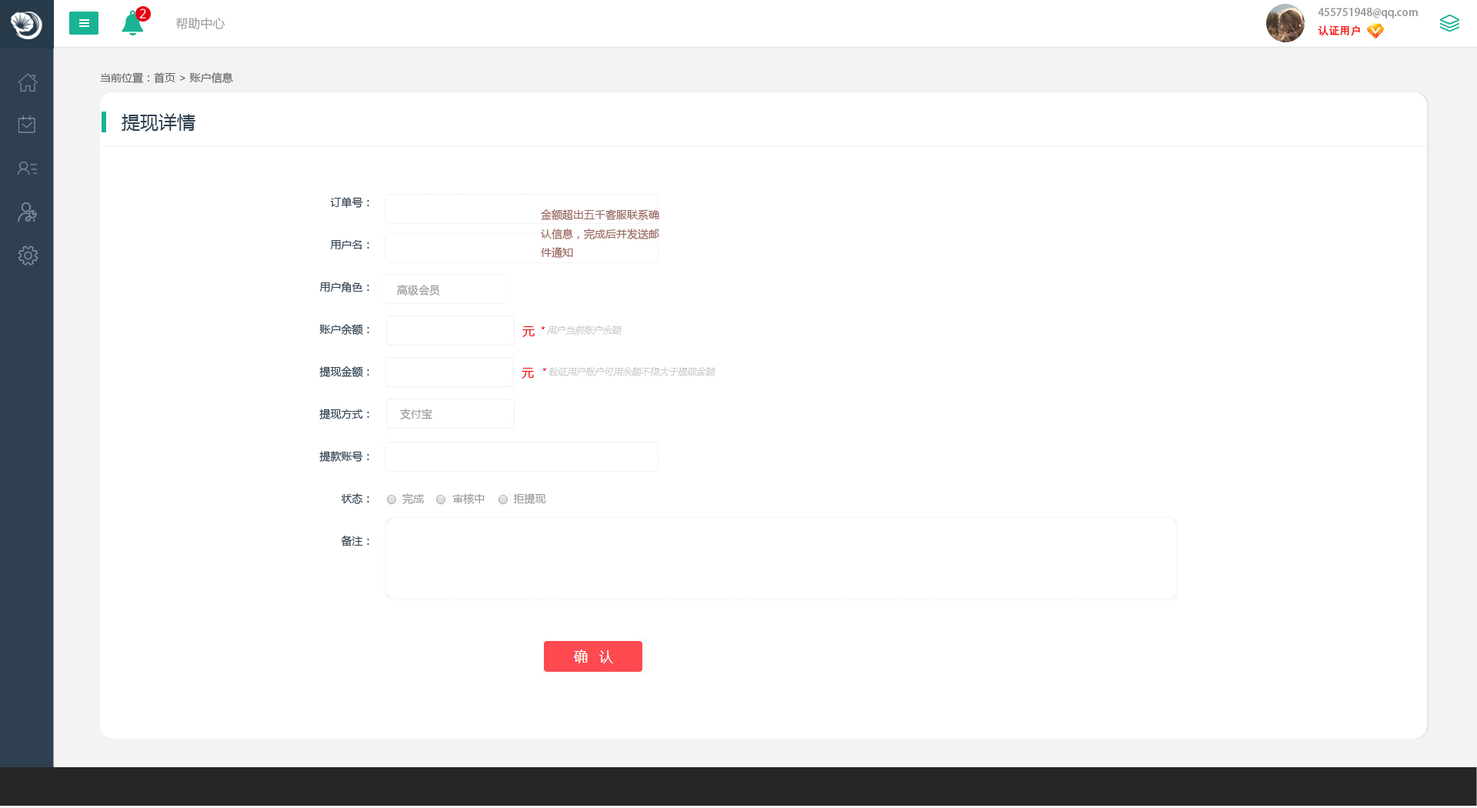
<style>
.page{position:relative;width:1477px;height:808px;background:#ffffff}
.page>*{position:absolute;margin:0}
.t1{font:12.3px "MicrosoftYaHei";color:#ffffff}
.t2{font:12.3px "MicrosoftYaHei";color:#999999}
.t3{font:10.8px/18.5px "AdobeHeitiStd-Regular";color:#999999}
.t4{font:10.8px/18.5px "AdobeHeitiStd-Regular";color:#f61e1e}
.t5{font:10.8px/18.5px "AdobeHeitiStd-Regular";color:#ffffff}
.t6{font:10.8px "MicrosoftYaHei";color:#666666}
.t7{font:18.5px "MicrosoftYaHei";color:#2f4050}
.t8{font:10.8px/42.3px "MicrosoftYaHei";color:#2f4050}
.t9{font:10.8px "MicrosoftYaHei";color:#986860}
.t10{font:10.8px "MicrosoftYaHei";color:#999999}
.t11{font:9.2px "MicrosoftYaHei";color:#cccccc;font-style:italic}
.t12{font:9.2px "MicrosoftYaHei";color:#e60012;font-style:italic}
</style>
<div class="page">
<p class="t1" style="left:139px;top:8px;width:7px;height:10px">2</p>
<p class="t2" style="left:176px;top:17px;width:49px;height:13px">帮助中心</p>
<p class="t3" style="left:1317px;top:8px;width:100px;height:28px">455751948@qq.com<br><span class="t4">认证用户               </span><span class="t5">退出</span></p>
<p class="t6" style="left:100px;top:72px;width:133px;height:11px">当前位置：首页 &gt; 账户信息</p>
<p class="t7" style="left:122px;top:113px;width:73px;height:19px">提现详情</p>
<p class="t8" style="left:319px;top:197px;width:50px;height:349px;text-align:right">订单号：<br>用户名：<br>用户角色：<br>账户余额：<br>提现金额：<br>提现方式：<br>提款账号：<br>状态：<br>备注：</p>
<p class="t9" style="left:541px;top:209px;width:118px;height:49px">金额超出五千客服联系确认信息，完成后并发送邮件通知</p>
<p class="t10" style="left:397px;top:285px;width:43px;height:11px">高级会员</p>
<p class="t11" style="left:541px;top:325px;width:80px;height:10px"><span class="t12">* </span>用户当前账户余额</p>
<p class="t11" style="left:543px;top:367px;width:172px;height:9px"><span class="t12">* </span>验证用户账户可用余额不得大于提现金额</p>
<p class="t10" style="left:400px;top:408px;width:32px;height:11px">支付宝</p>
<p class="t10" style="left:402px;top:493px;width:144px;height:12px">完成         审核中         拒提现</p>
</div>
